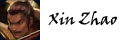
<style>
.page{position:relative;width:140px;height:40px;background:#ffffff}
.page>*{position:absolute;margin:0}
.t1{font:16px "VinerHandITC";color:#000000}
</style>
<div class="page">
<p class="t1" style="left:48px;top:11px;width:70px;height:15px">Xin Zhao</p>
</div>
